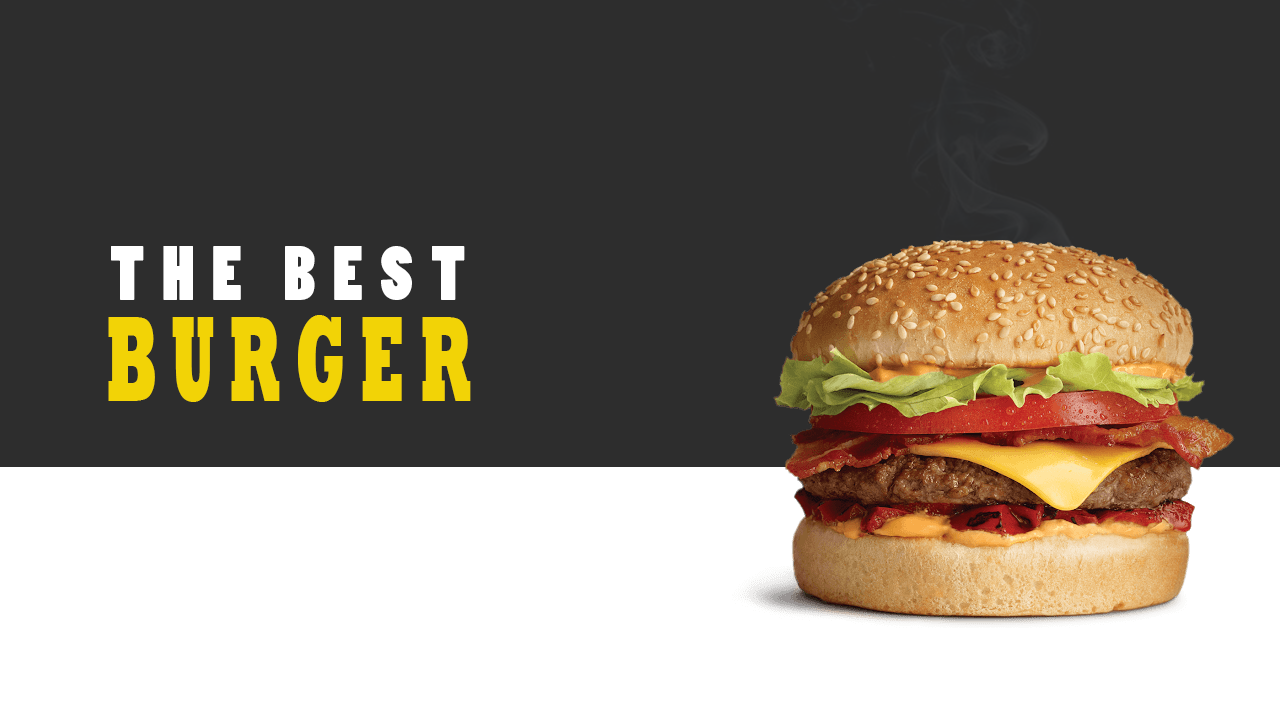
<style>
.page{position:relative;width:1280px;height:720px;background:#2d2d2d}
.page>*{position:absolute;margin:0}
.t1{font:72px "PoplarStd";letter-spacing:0.24em;color:#ffffff;text-transform:uppercase}
.t2{font:124.4px "Rockwell-ExtraBold";letter-spacing:0.24em;color:#f2d306;text-transform:uppercase;scale:0.48 1}
</style>
<div class="page">
<p class="t1" style="left:111px;top:246px;width:354px;height:54px">the best</p>
<p class="t2" style="left:108px;top:315px;width:363px;height:87px">burger</p>
</div>
